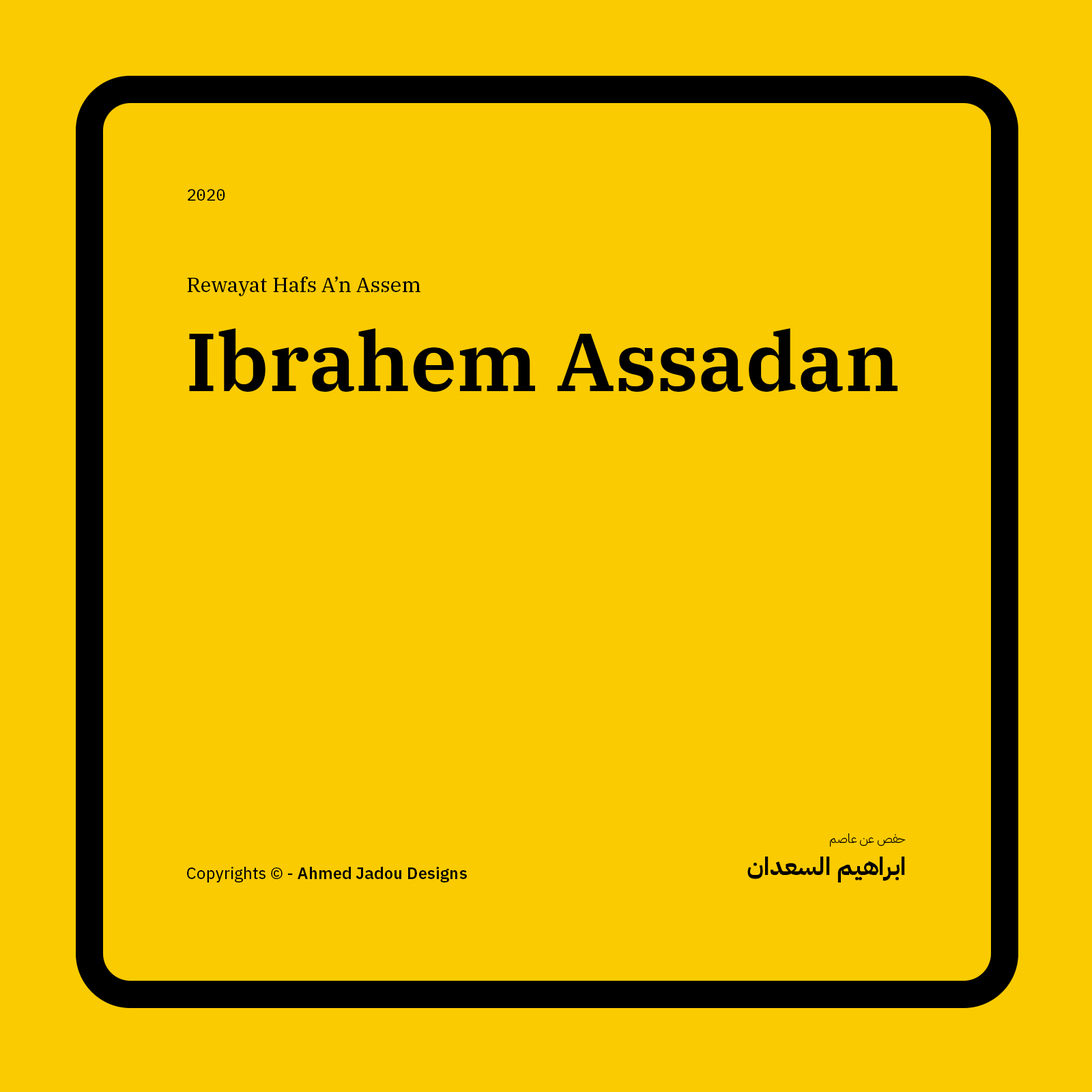
<style>
.page{position:relative;width:1092px;height:1092px;background:#facb00}
.page>*{position:absolute;margin:0}
.t1{font:16.4px "IBMPlexMono-Text";color:#000000}
.t2{font:20.5px "IBMPlexSerif-Text";color:#000000}
.t3{font:81.9px "IBMPlexSerif-SemiBold";color:#000000}
.t4{font:12.3px "IBMPlexArabic-Light";color:#000000}
.t5{font:24.6px "IBMPlexArabic-Bold";color:#000000}
.t6{font:16.4px "IBMPlexSans-SemiBold";color:#000000}
.t7{font:16.4px "IBMPlexSans-Text";color:#000000}
</style>
<div class="page">
<p class="t1" style="left:188px;top:189px;width:37px;height:12px">2020</p>
<p class="t2" style="left:187px;top:276px;width:233px;height:20px">Rewayat Hafs A’n Assem</p>
<p class="t3" style="left:189px;top:328px;width:709px;height:64px">Ibrahem Assadan</p>
<p class="t4" style="left:830px;top:833px;width:76px;height:14px">حفص عن عاصم</p>
<p class="t5" style="left:747px;top:857px;width:158px;height:25px">ابراهيم السعدان</p>
<p class="t6" style="left:187px;top:867px;width:280px;height:15px"><span class="t7">Copyrights © - </span>Ahmed Jadou Designs</p>
</div>
